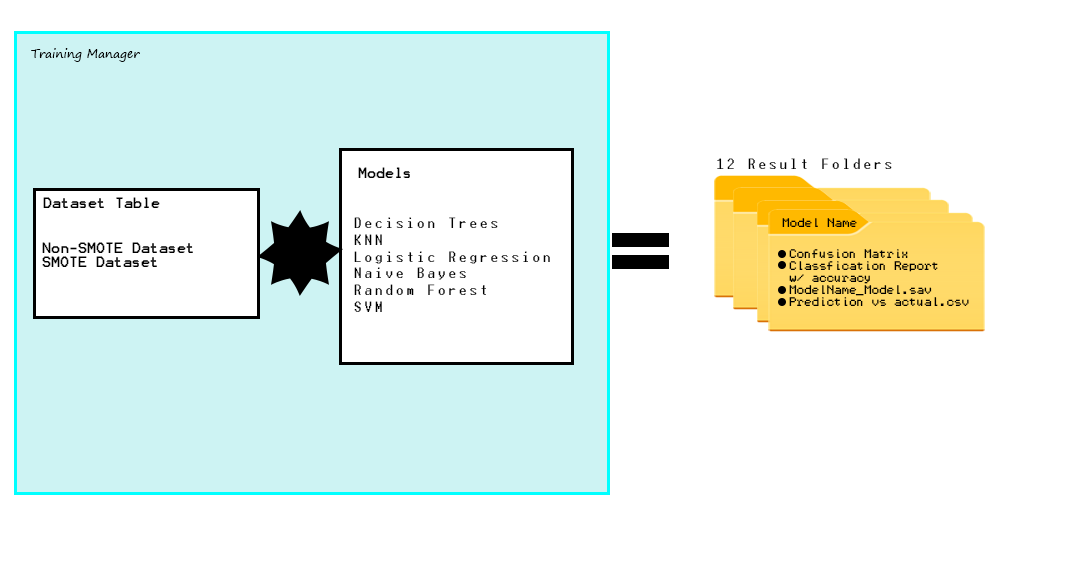
<style>
.page{position:relative;width:1080px;height:576px;background:#ffffff}
.page>*{position:absolute;margin:0}
.t1{font:12px "SegoePrint";color:#000000}
.t2{font:14px "Terminal";color:#000000}
.t3{font:12px "Terminal";color:#000000}
.t4{font:10px "Terminal";color:#000000}
</style>
<div class="page">
<p class="t1" style="left:31px;top:48px;width:109px;height:14px">Training Manager</p>
<p class="t2" style="left:717px;top:158px;width:175px;height:11px">12 Result Folders</p>
<p class="t3" style="left:358px;top:167px;width:52px;height:11px">Models</p>
<p class="t3" style="left:43px;top:197px;width:117px;height:11px">Dataset Table</p>
<p class="t2" style="left:354px;top:217px;width:196px;height:95px;text-align:right">Decision Trees<br>KNN<br>Logistic Regression<br>Naive Bayes<br>Random Forest<br>SVM</p>
<p class="t4" style="left:782px;top:218px;width:75px;height:9px">Model Name</p>
<p class="t3" style="left:42px;top:242px;width:151px;height:25px;text-align:right">Non-SMOTE Dataset<br>SMOTE Dataset</p>
<p class="t4" style="left:789px;top:249px;width:180px;height:57px;text-align:right">Confusion Matrix<br>Classfication Report<br>w/ accuracy<br>ModelName_Model.sav<br>Prediction vs actual.csv</p>
</div>
